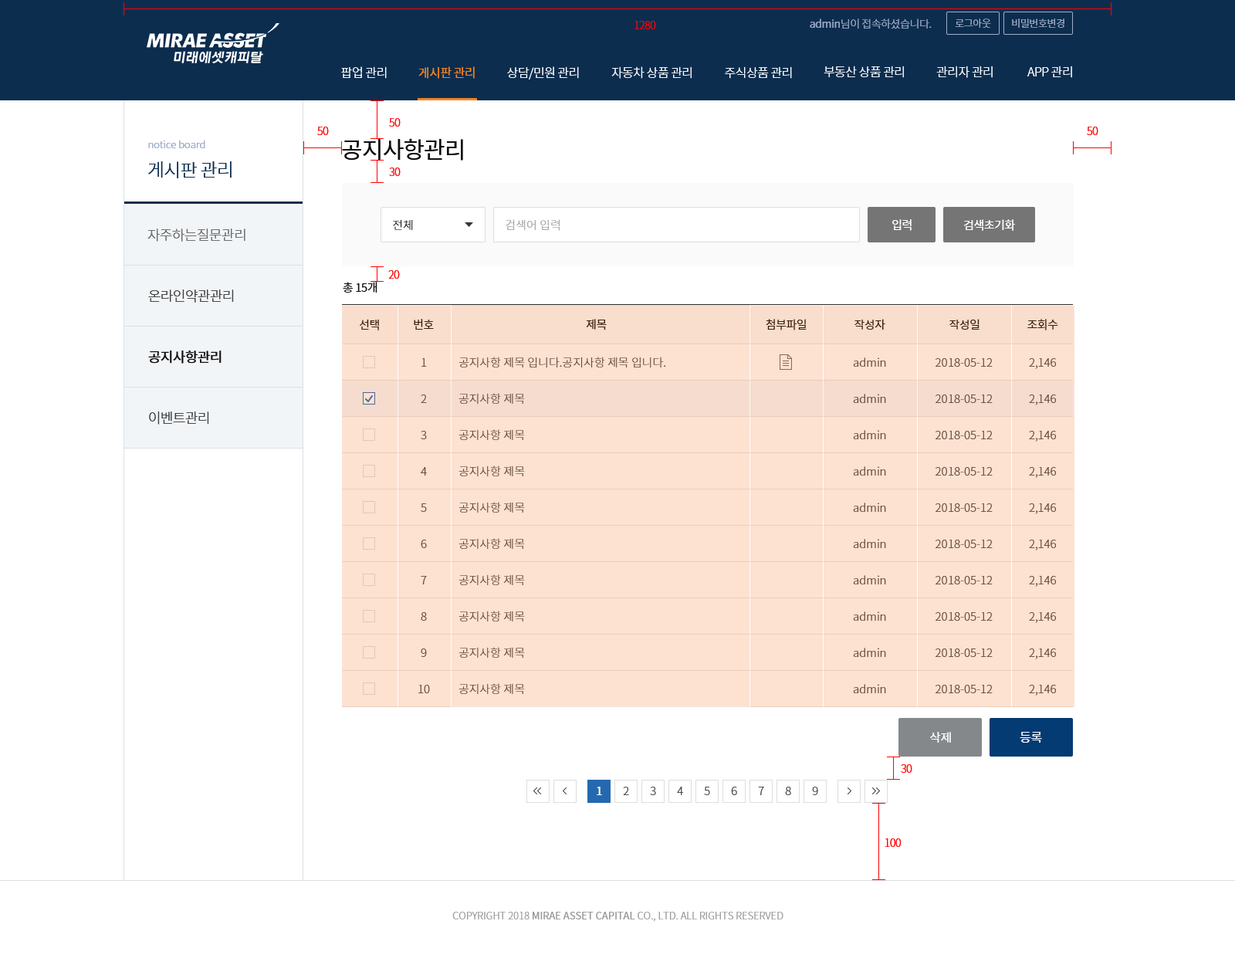
<style>
.page{position:relative;width:1235px;height:965px;background:#ffffff}
.page>*{position:absolute;margin:0}
.t1{font:10.8px "NotoSansCJKkr-Light";letter-spacing:-0.03em;color:#ff0000}
.t2{font:10.8px "NotoSansCJKkr-Light";letter-spacing:-0.03em;color:#99aac7}
.t3{font:10.8px "NotoSansCJKkr-Regular";letter-spacing:-0.03em;color:#99aac7}
.t4{font:10px "NotoSansCJKkr-Light";letter-spacing:-0.03em;color:#9fafca}
.t5{font:12.4px "NotoSansCJKkr-Light";letter-spacing:-0.03em;color:#ffffff}
.t6{font:12.4px "NotoSansCJKkr-Regular";letter-spacing:-0.03em;color:#f58220}
.t7{font:10px "NotoSansCJKkr-Light";color:#99aac7}
.t8{font:23.2px "NotoSansCJKkr-Regular";letter-spacing:-0.03em;color:#0f0f0f}
.t9{font:18.5px "NotoSansCJKkr-Light";letter-spacing:-0.03em;color:#0c2d4e}
.t10{font:11.6px "NotoSansCJKkr-Light";color:#0f0f0f}
.t11{font:11.6px "NotoSansCJKkr-Light";color:#a1a1a1}
.t12{font:11.6px "NotoSansCJKkr-Regular";letter-spacing:-0.03em;color:#ffffff}
.t13{font:13.9px "NotoSansCJKkr-Light";letter-spacing:-0.03em;color:#686868}
.t14{font:11.6px "NotoSansCJKkr-Regular";letter-spacing:-0.03em;color:#0f0f0f}
.t15{font:13.9px "NotoSansCJKkr-Light";letter-spacing:-0.03em;color:#404040}
.t16{font:11.6px "NotoSansCJKkr-Regular";letter-spacing:-0.03em;color:#3d2111}
.t17{font:13.9px "NotoSansCJKkr-Regular";letter-spacing:-0.03em;color:#0f0f0f}
.t18{font:11.6px/36.3px "NotoSansCJKkr-Light";color:#654838}
.t19{font:12.4px "NotoSansCJKkr-Regular";letter-spacing:-0.03em;color:#ffffff}
.t20{font:11.6px "NotoSansCJKkr-Regular";color:#ffffff}
.t21{font:11.6px "NotoSansCJKkr-Light";color:#404040}
.t22{font:10px "NotoSansCJKkr-Light";color:#999999}
.t23{font:10px "NotoSansCJKkr-Regular";color:#999999}
</style>
<div class="page">
<p class="t1" style="left:635px;top:21px;width:21px;height:8px">1280</p>
<p class="t2" style="left:810px;top:19px;width:122px;height:10px"><span class="t3">admin</span>님이 접속하셨습니다.</p>
<p class="t4" style="left:955px;top:19px;width:36px;height:9px">로그아웃</p>
<p class="t4" style="left:1012px;top:19px;width:53px;height:9px">비밀번호변경</p>
<p class="t5" style="left:824px;top:66px;width:80px;height:12px">부동산 상품 관리</p>
<p class="t5" style="left:937px;top:66px;width:56px;height:12px">관리자 관리</p>
<p class="t5" style="left:1028px;top:66px;width:45px;height:12px">APP 관리</p>
<p class="t5" style="left:341px;top:66px;width:46px;height:13px">팝업 관리</p>
<p class="t6" style="left:419px;top:66px;width:56px;height:13px">게시판 관리</p>
<p class="t5" style="left:507px;top:66px;width:72px;height:14px">상담/민원 관리</p>
<p class="t5" style="left:612px;top:66px;width:80px;height:13px">자동차 상품 관리</p>
<p class="t5" style="left:725px;top:66px;width:67px;height:13px">주식상품 관리</p>
<p class="t1" style="left:389px;top:118px;width:12px;height:9px">50</p>
<p class="t1" style="left:317px;top:127px;width:12px;height:8px">50</p>
<p class="t1" style="left:1087px;top:127px;width:12px;height:8px">50</p>
<p class="t7" style="left:148px;top:140px;width:57px;height:8px">notice board</p>
<p class="t8" style="left:342px;top:138px;width:121px;height:23px">공지사항관리</p>
<p class="t9" style="left:148px;top:161px;width:84px;height:17px">게시판 관리</p>
<p class="t1" style="left:389px;top:168px;width:12px;height:8px">30</p>
<p class="t10" style="left:393px;top:219px;width:20px;height:11px">전체</p>
<p class="t11" style="left:506px;top:219px;width:54px;height:12px">검색어 입력</p>
<p class="t12" style="left:893px;top:219px;width:19px;height:12px">입력</p>
<p class="t12" style="left:964px;top:219px;width:51px;height:12px">검색초기화</p>
<p class="t13" style="left:147px;top:229px;width:99px;height:13px">자주하는질문관리</p>
<p class="t14" style="left:343px;top:282px;width:35px;height:11px">총 15개</p>
<p class="t1" style="left:388px;top:270px;width:12px;height:9px">20</p>
<p class="t15" style="left:148px;top:290px;width:86px;height:13px">온라인약관관리</p>
<p class="t16" style="left:360px;top:319px;width:19px;height:11px">선택</p>
<p class="t16" style="left:414px;top:319px;width:20px;height:11px">번호</p>
<p class="t16" style="left:586px;top:319px;width:21px;height:11px">제목</p>
<p class="t16" style="left:766px;top:319px;width:41px;height:11px">첨부파일</p>
<p class="t16" style="left:855px;top:319px;width:31px;height:11px">작성자</p>
<p class="t16" style="left:950px;top:319px;width:30px;height:11px">작성일</p>
<p class="t16" style="left:1028px;top:319px;width:31px;height:11px">조회수</p>
<p class="t17" style="left:148px;top:351px;width:74px;height:13px">공지사항관리</p>
<p class="t18" style="left:419px;top:358px;width:11px;height:335px;text-align:center">1<br>2<br>3<br>4<br>5<br>6<br>7<br>8<br>9<br>10</p>
<p class="t18" style="left:459px;top:357px;width:207px;height:337px">공지사항 제목 입니다.공지사항 제목 입니다.<br>공지사항 제목<br>공지사항 제목<br>공지사항 제목<br>공지사항 제목<br>공지사항 제목<br>공지사항 제목<br>공지사항 제목<br>공지사항 제목<br>공지사항 제목</p>
<p class="t18" style="left:853px;top:358px;width:33px;height:335px;text-align:center">admin<br>admin<br>admin<br>admin<br>admin<br>admin<br>admin<br>admin<br>admin<br>admin</p>
<p class="t18" style="left:936px;top:358px;width:57px;height:335px;text-align:center">2018-05-12<br>2018-05-12<br>2018-05-12<br>2018-05-12<br>2018-05-12<br>2018-05-12<br>2018-05-12<br>2018-05-12<br>2018-05-12<br>2018-05-12</p>
<p class="t18" style="left:1029px;top:358px;width:28px;height:338px;text-align:center">2,146<br>2,146<br>2,146<br>2,146<br>2,146<br>2,146<br>2,146<br>2,146<br>2,146<br>2,146</p>
<p class="t15" style="left:149px;top:412px;width:60px;height:13px">이벤트관리</p>
<p class="t19" style="left:930px;top:732px;width:21px;height:11px">삭제</p>
<p class="t19" style="left:1020px;top:732px;width:22px;height:11px">등록</p>
<p class="t1" style="left:901px;top:764px;width:12px;height:9px">30</p>
<p class="t20" style="left:597px;top:787px;width:5px;height:8px">1</p>
<p class="t21" style="left:623px;top:787px;width:6px;height:8px">2</p>
<p class="t21" style="left:650px;top:787px;width:6px;height:8px">3</p>
<p class="t21" style="left:677px;top:787px;width:6px;height:8px">4</p>
<p class="t21" style="left:704px;top:787px;width:6px;height:8px">5</p>
<p class="t21" style="left:731px;top:787px;width:6px;height:8px">6</p>
<p class="t21" style="left:758px;top:787px;width:6px;height:8px">7</p>
<p class="t21" style="left:785px;top:787px;width:6px;height:8px">8</p>
<p class="t21" style="left:812px;top:787px;width:6px;height:8px">9</p>
<p class="t1" style="left:885px;top:839px;width:17px;height:8px">100</p>
<p class="t22" style="left:452px;top:912px;width:332px;height:10px">COPYRIGHT 2018 <span class="t23">MIRAE ASSET CAPITAL</span> CO., LTD. ALL RIGHTS RESERVED</p>
</div>
